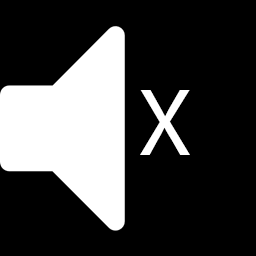
<style>
.page{position:relative;width:256px;height:256px;background:#000000}
.page>*{position:absolute;margin:0}
.t1{font:96px "MyriadPro-Regular";color:#ffffff}
</style>
<div class="page">
<p class="t1" style="left:140px;top:90px;width:50px;height:65px">X</p>
</div>
